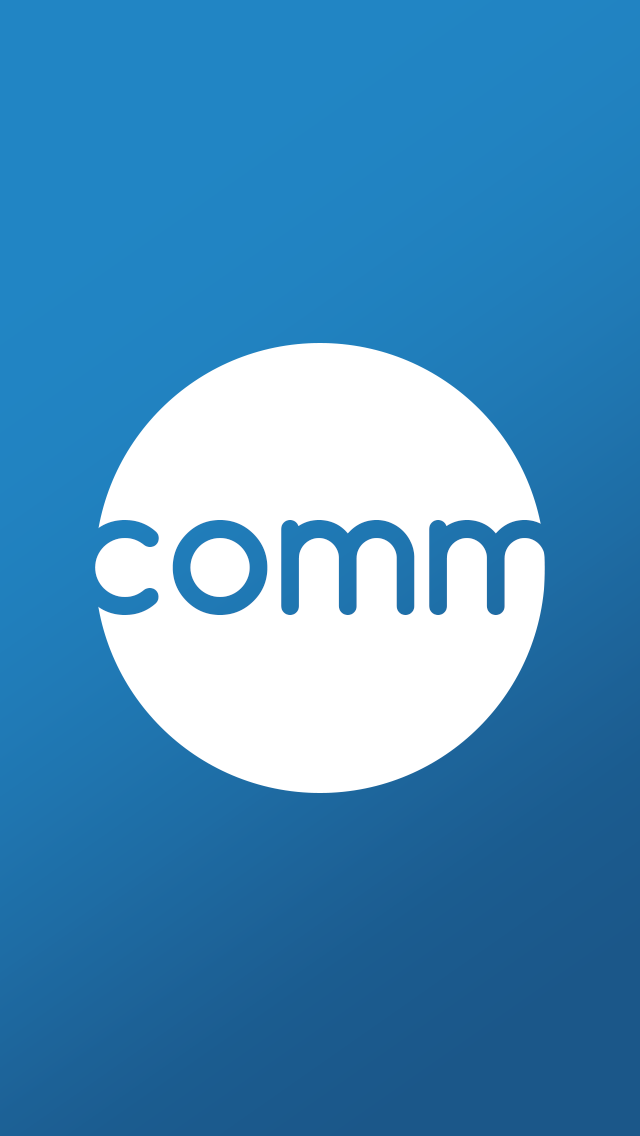
<style>
.page{position:relative;width:640px;height:1136px}
.page>*{position:absolute;margin:0}
.t1{font:173px "Comfortaa-Bold";color:#1f77b2}
</style>
<div class="page">
<p class="t1" style="left:77px;top:520px;width:486px;height:95px">comm</p>
</div>
